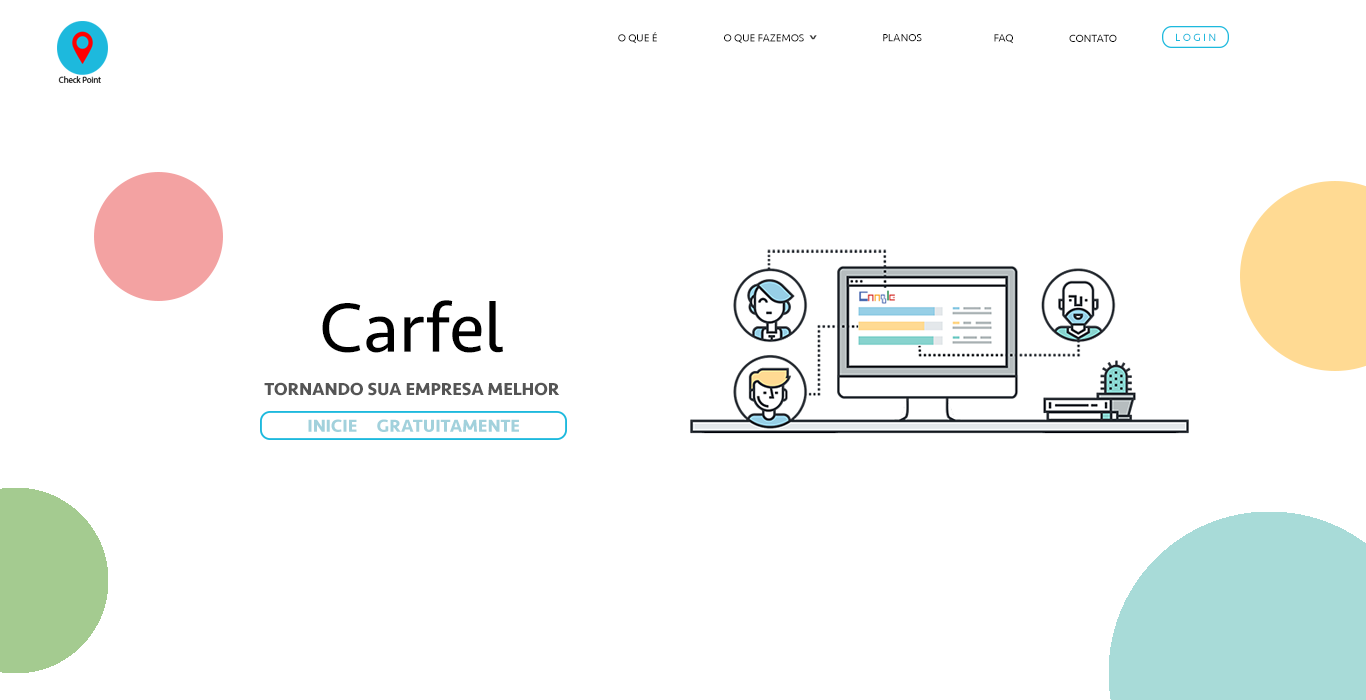
<style>
.page{position:relative;width:1366px;height:700px;background:#ffffff}
.page>*{position:absolute;margin:0}
.t1{font:11px "Seravek";color:#000000}
.t2{font:24px "Seravek";color:#3a3a3a}
.t3{font:11px "Seravek";color:#1db9dd}
.t4{font:18px "Seravek-Bold";color:#555555}
.t5{font:72px "Seravek";color:#000000}
.t6{font:18px "Seravek-Bold";color:#a2d1dc}
</style>
<div class="page">
<p class="t1" style="left:618px;top:32px;width:39px;height:12px">O QUE É</p>
<p class="t1" style="left:724px;top:34px;width:80px;height:10px">O QUE FAZEMOS</p>
<p class="t2" style="left:809px;top:35px;width:8px;height:5px;rotate:-180deg">ˆ</p>
<p class="t1" style="left:883px;top:34px;width:39px;height:8px">PLANOS</p>
<p class="t1" style="left:994px;top:34px;width:19px;height:10px">FAQ</p>
<p class="t1" style="left:1069px;top:34px;width:48px;height:8px">CONTATO</p>
<p class="t3" style="left:1176px;top:33px;width:40px;height:8px">L O G I N</p>
<p class="t4" style="left:264px;top:300px;width:296px;height:96px;text-align:center"><span class="t5">Carfel<br><br></span>TORNANDO SUA EMPRESA MELHOR</p>
<p class="t6" style="left:308px;top:419px;width:211px;height:13px">INICIE     GRATUITAMENTE</p>
</div>
